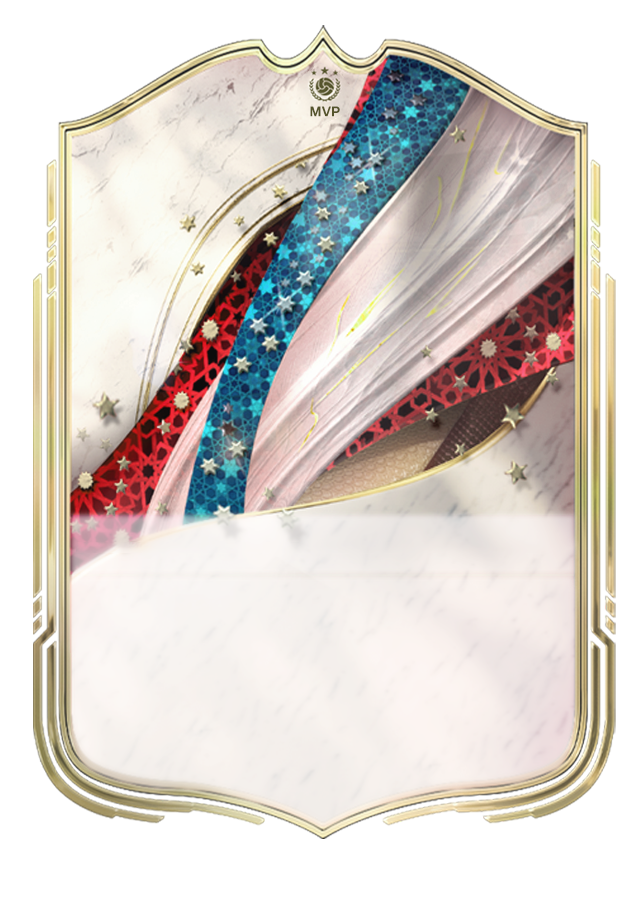
<style>
.page{position:relative;width:644px;height:900px;background:#ffffff}
.page>*{position:absolute;margin:0}
.t1{font:13.6px "ZalandoSans-SemiBold";color:#54532b}
</style>
<div class="page">
<p class="t1" style="left:310px;top:106px;width:30px;height:11px">MVP</p>
</div>
